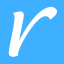
<style>
.page{position:relative;width:64px;height:64px;background:#3eb0ff}
.page>*{position:absolute;margin:0}
.t1{font:90px "LucidaHandwriting-Italic";color:#ffffff}
</style>
<div class="page">
<p class="t1" style="left:8px;top:7px;width:49px;height:50px">r</p>
</div>
